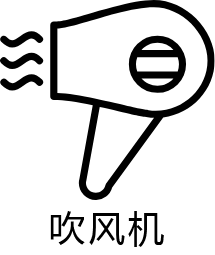
<style>
.page{position:relative;width:215px;height:255px;background:#ffffff}
.page>*{position:absolute;margin:0}
.t1{font:36px "MicrosoftYaHei";letter-spacing:0.1em;color:#000000}
</style>
<div class="page">
<p class="t1" style="left:50px;top:211px;width:114px;height:36px">吹风机</p>
</div>
